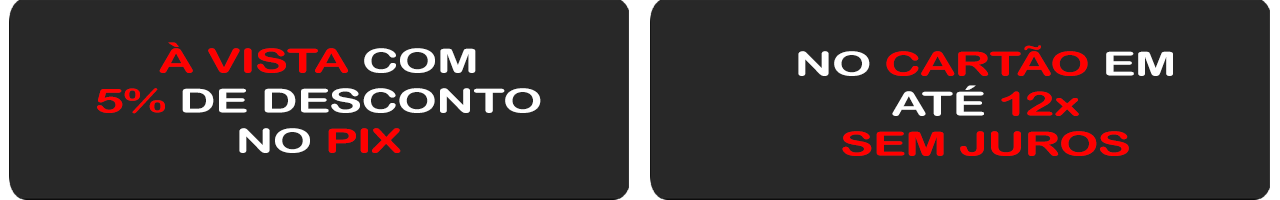
<style>
.page{position:relative;width:1280px;height:200px;background:#282828}
.page>*{position:absolute;margin:0}
.t1{font:33.3px "ArialRoundedMTBold";color:#ffffff;scale:1.5 1}
.t2{font:33.3px "ArialRoundedMTBold";color:#ff0000;scale:1.5 1}
</style>
<div class="page">
<p class="t1" style="left:97px;top:42px;width:444px;height:111px;text-align:center"><span class="t2">À VISTA</span> COM<br><span class="t2">5%</span> DE DESCONTO<br>NO <span class="t2">PIX</span></p>
<p class="t2" style="left:798px;top:45px;width:375px;height:111px;text-align:center"><span class="t1">NO </span>CARTÃO <span class="t1">EM<br>ATÉ </span>12x<br>SEM JUROS</p>
</div>
